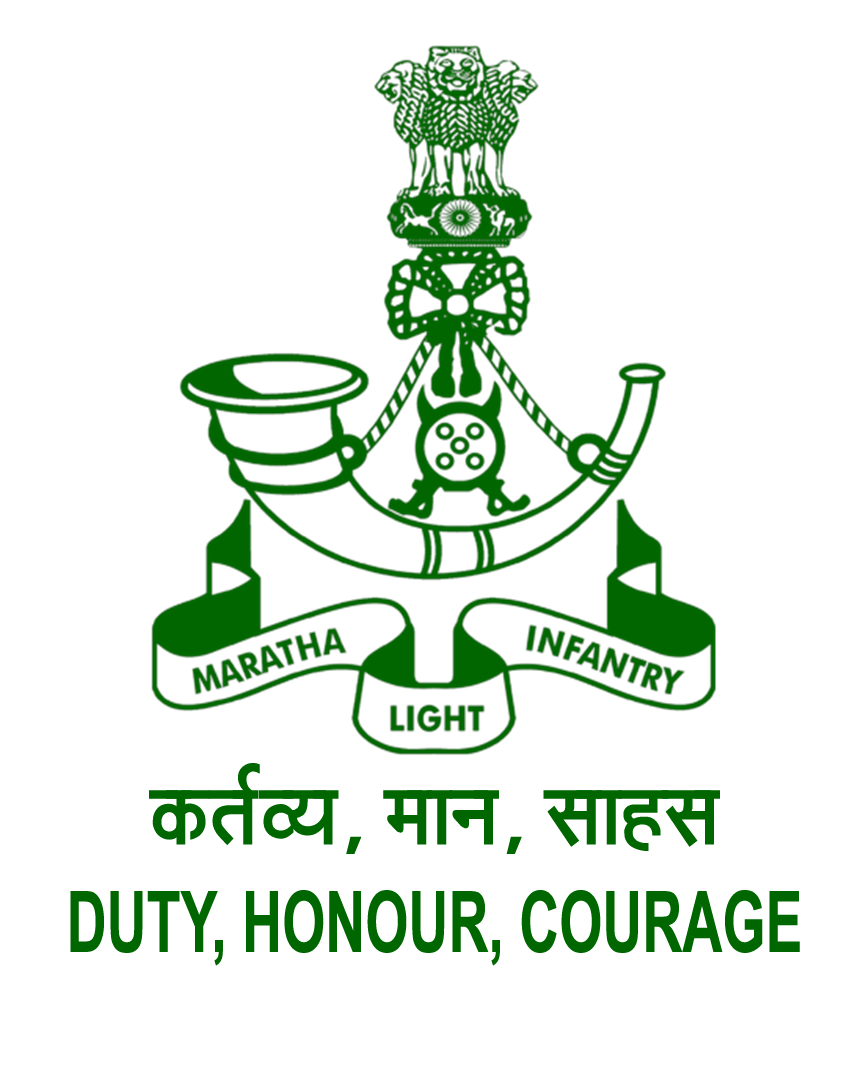
<style>
.page{position:relative;width:864px;height:1080px;background:#ffffff}
.page>*{position:absolute;margin:0}
.t1{font:100.8px "APS-EML-DV-Prakash-Bold";color:#006600;scale:0.92 1}
.t2{font:84.7px "Arial-BoldMT";color:#006600;scale:0.65 1}
</style>
<div class="page">
<p class="t1" style="left:149px;top:763px;width:571px;height:91px">‡ãŠ¦ãÃÌ¾ã, ½ãã¶ã, ÔããÖÔã</p>
<p class="t2" style="left:70px;top:890px;width:730px;height:76px">DUTY, HONOUR, COURAGE</p>
</div>
